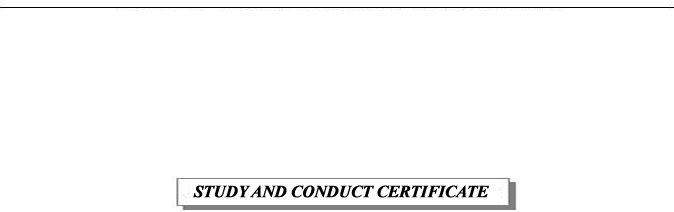
<style>
.page{position:relative;width:674px;height:212px;background:#ffffff}
.page>*{position:absolute;margin:0}
.t1{font:16.8px "TimesNewRomanPS-BoldItalicMT";letter-spacing:-0.025em;color:#000000;font-weight:bold}
</style>
<div class="page">
<p class="t1" style="left:193px;top:185px;width:296px;height:13px">STUDY AND CONDUCT CERTIFICATE</p>
</div>
